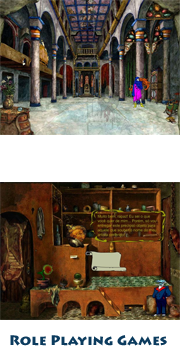
<style>
.page{position:relative;width:180px;height:360px;background:#ffffff}
.page>*{position:absolute;margin:0}
.t1{font:14px "LithosPro-Black";color:#0b3b5e}
</style>
<div class="page">
<p class="t1" style="left:10px;top:335px;width:157px;height:11px">Role Playing Games</p>
</div>
